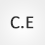
<style>
.page{position:relative;width:45px;height:45px}
.page>*{position:absolute;margin:0}
.t1{font:18px "Calibri";color:#333333;font-weight:bold}
</style>
<div class="page">
<p class="t1" style="left:10px;top:16px;width:24px;height:13px">C.E</p>
</div>
